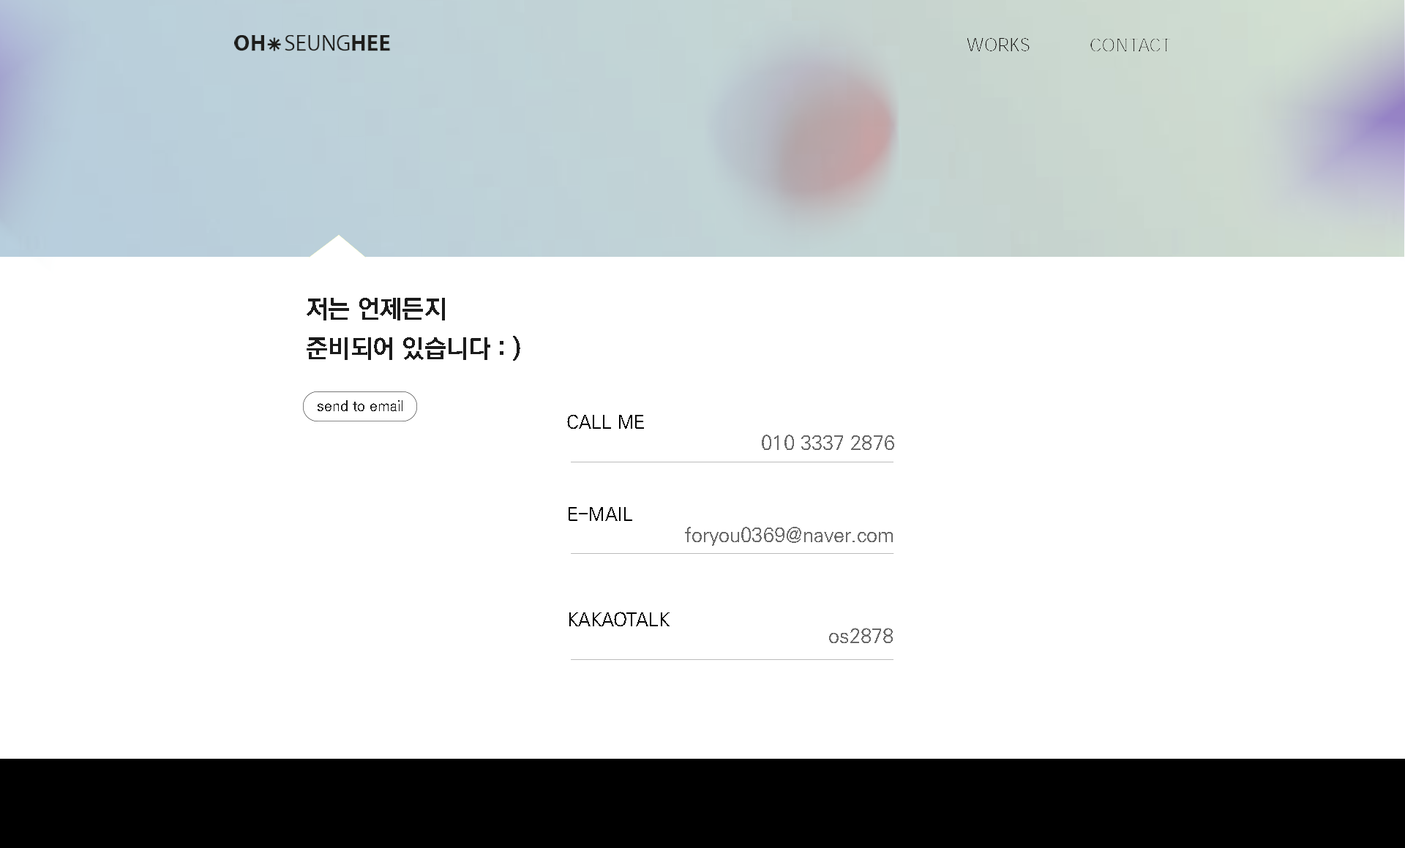
<style>
.page{position:relative;width:1405px;height:848px;background:#ffffff}
.page>*{position:absolute;margin:0}
.t1{font:25.4px/39.9px "KoPubWorldDotumPB";color:#1b1b1b}
.t2{font:14.3px "KoPubWorldDotumPM";color:#1b1b1b}
.t3{font:18.6px "KoPubWorldDotumPM";color:#000000}
.t4{font:19.8px "KoPubWorldDotumPM";color:#696969}
.t5{font:18.7px "KoPubWorldDotumPM";color:#000000}
.t6{font:19.9px "KoPubWorldDotumPM";color:#696969}
.t7{font:20px "KoPubWorldDotumPM";color:#696969}
</style>
<div class="page">
<p class="t1" style="left:307px;top:298px;width:213px;height:63px">저는 언제든지<br>준비되어 있습니다 : )</p>
<p class="t2" style="left:318px;top:400px;width:85px;height:11px">send to email</p>
<p class="t3" style="left:567px;top:415px;width:77px;height:14px">CALL ME</p>
<p class="t4" style="left:762px;top:435px;width:133px;height:15px">010 3337 2876</p>
<p class="t5" style="left:569px;top:507px;width:63px;height:14px">E-MAIL</p>
<p class="t6" style="left:685px;top:527px;width:208px;height:19px">foryou0369@naver.com</p>
<p class="t5" style="left:570px;top:612px;width:100px;height:15px">KAKAOTALK</p>
<p class="t7" style="left:829px;top:628px;width:64px;height:15px">os2878</p>
</div>
